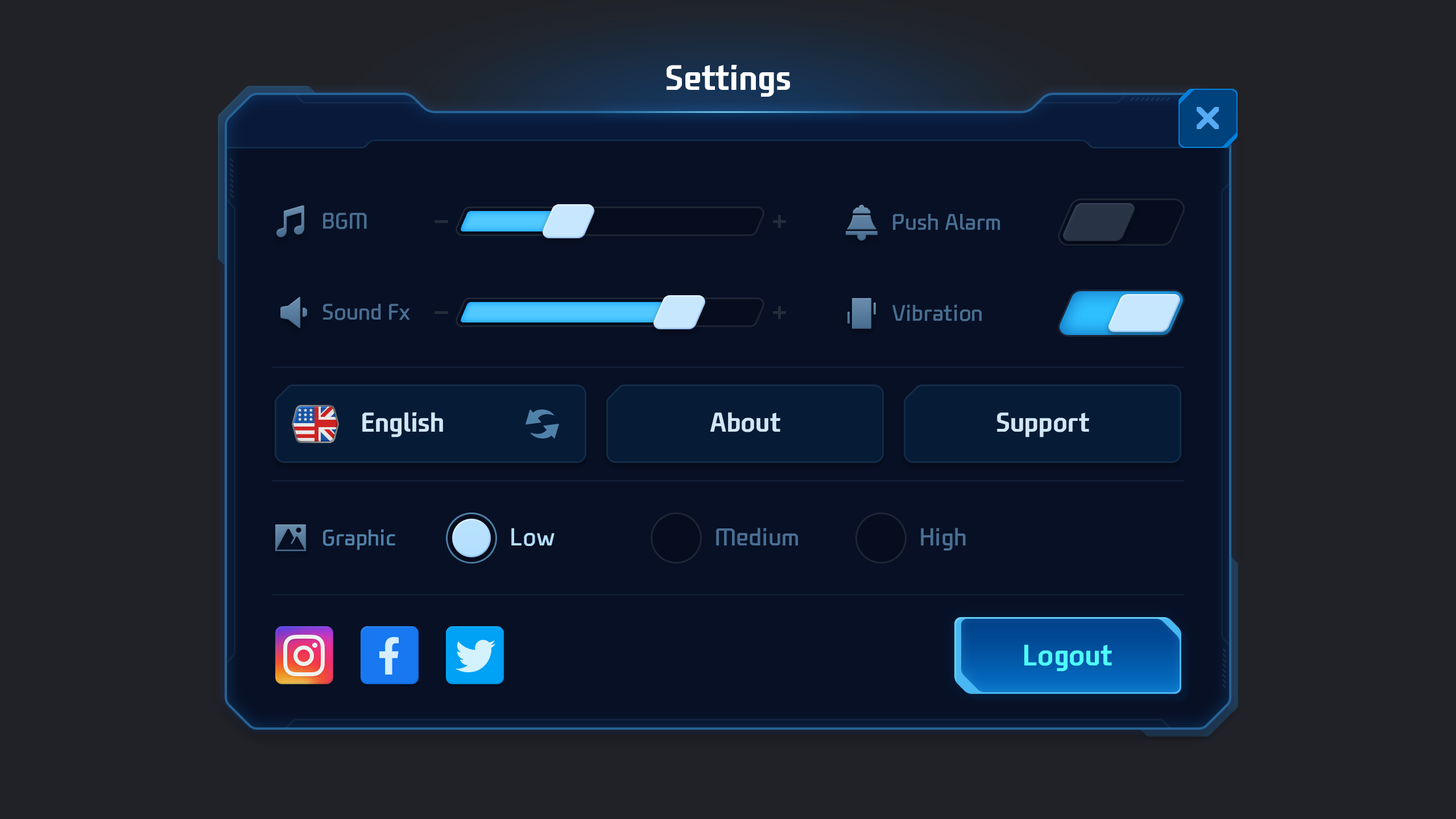
<style>
.page{position:relative;width:1456px;height:819px;background:#212227}
.page>*{position:absolute;margin:0}
.t1{font:34.1px "NEXONFootballGothicB";color:#ffffff}
.t2{font:21.8px "NEXONFootballGothicL";color:#496e91;text-transform:uppercase}
.t3{font:21.8px "NEXONFootballGothicL";color:#496e91}
.t4{font:26.2px "NEXONFootballGothicB";color:#cfe7f7}
.t5{font:21.8px "NEXONFootballGothicL";color:#5081a8}
.t6{font:23.9px "NEXONFootballGothicL";color:#b4dffe}
.t7{font:23.9px "NEXONFootballGothicL";color:#496e91}
.t8{font:28.4px "NEXONFootballGothicB";color:#4efefe}
</style>
<div class="page">
<p class="t1" style="left:667px;top:65px;width:123px;height:32px">Settings</p>
<p class="t2" style="left:323px;top:213px;width:44px;height:16px">BGM</p>
<p class="t3" style="left:893px;top:214px;width:107px;height:16px">Push Alarm</p>
<p class="t3" style="left:323px;top:304px;width:87px;height:16px">Sound Fx</p>
<p class="t3" style="left:892px;top:304px;width:90px;height:17px">Vibration</p>
<p class="t4" style="left:362px;top:412px;width:81px;height:25px">English</p>
<p class="t4" style="left:710px;top:412px;width:70px;height:20px">About</p>
<p class="t4" style="left:997px;top:412px;width:92px;height:25px">Support</p>
<p class="t5" style="left:323px;top:529px;width:72px;height:21px">Graphic</p>
<p class="t6" style="left:511px;top:528px;width:44px;height:18px">Low</p>
<p class="t7" style="left:716px;top:528px;width:82px;height:18px">Medium</p>
<p class="t7" style="left:921px;top:528px;width:45px;height:23px">High</p>
<p class="t8" style="left:1024px;top:644px;width:88px;height:27px">Logout</p>
</div>
